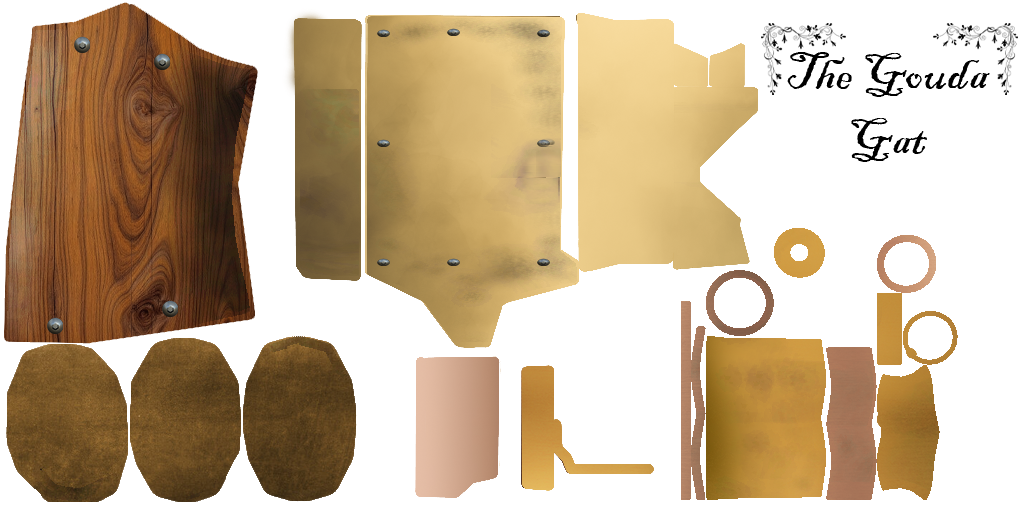
<style>
.page{position:relative;width:1024px;height:512px;background:#ffffff}
.page>*{position:absolute;margin:0}
.t1{font:53.8px "BlackadderITC-Regular";color:#000000}
</style>
<div class="page">
<p class="t1" style="left:787px;top:52px;width:203px;height:110px;text-align:center">The Gouda<br>Gat</p>
</div>
